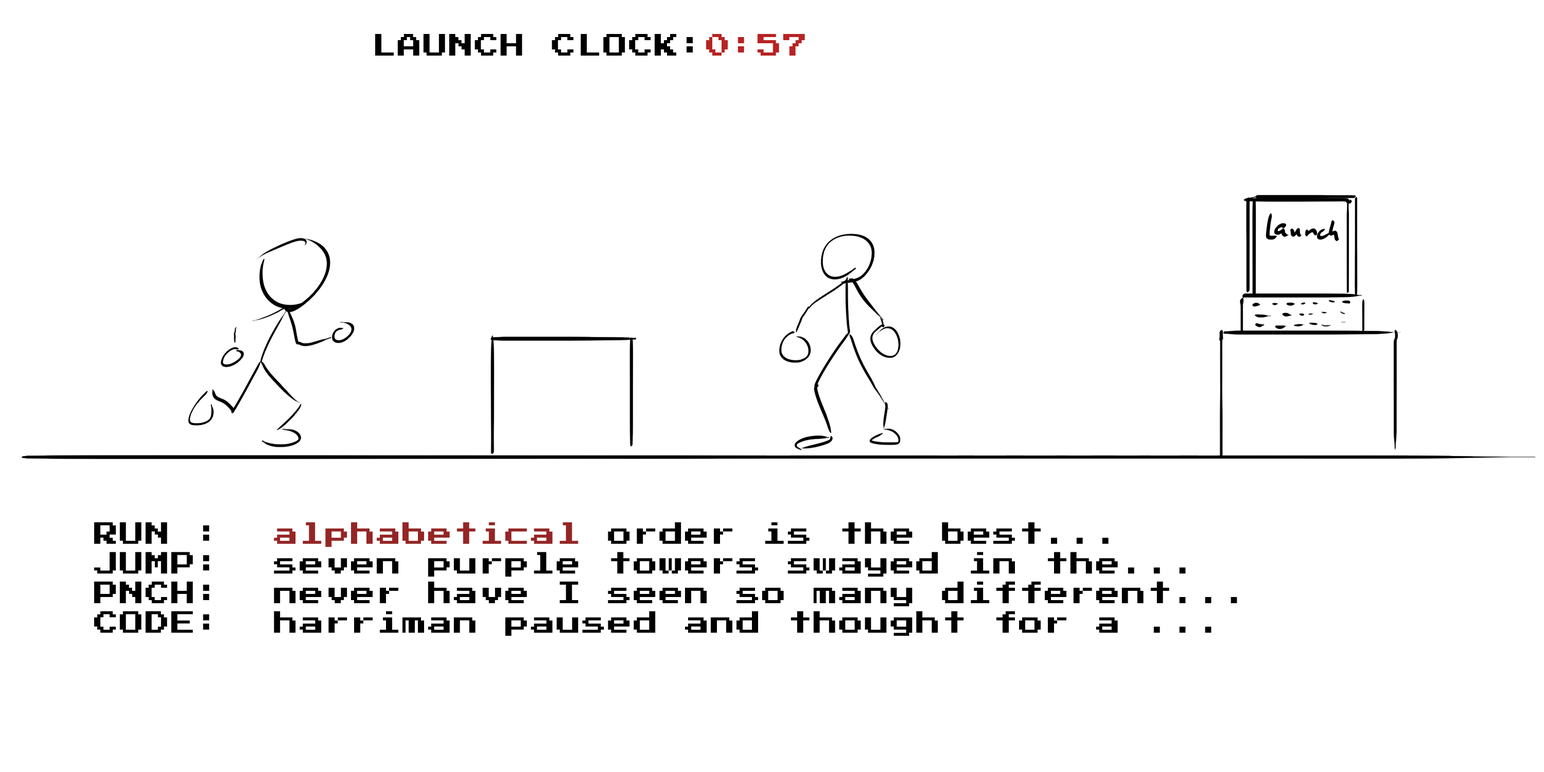
<style>
.page{position:relative;width:1544px;height:772px;background:#ffffff}
.page>*{position:absolute;margin:0}
.t1{font:24.7px "PressStart2P-Regular";letter-spacing:0.04em;color:#000000}
.t2{font:24.7px "PressStart2P-Regular";letter-spacing:0.04em;color:#b82323}
.t3{font:24.7px "PressStart2P-Regular";letter-spacing:0.04em;color:#952525}
</style>
<div class="page">
<p class="t1" style="left:375px;top:34px;width:430px;height:22px">LAUNCH CLOCK:<span class="t2">0:57</span></p>
<p class="t1" style="left:94px;top:522px;width:1143px;height:114px">RUN :  <span class="t3">alphabetical </span>order is the best...<br>JUMP:  seven purple towers swayed in the...<br>PNCH:  never have I seen so many different...<br>CODE:  harriman paused and thought for a ...</p>
</div>
